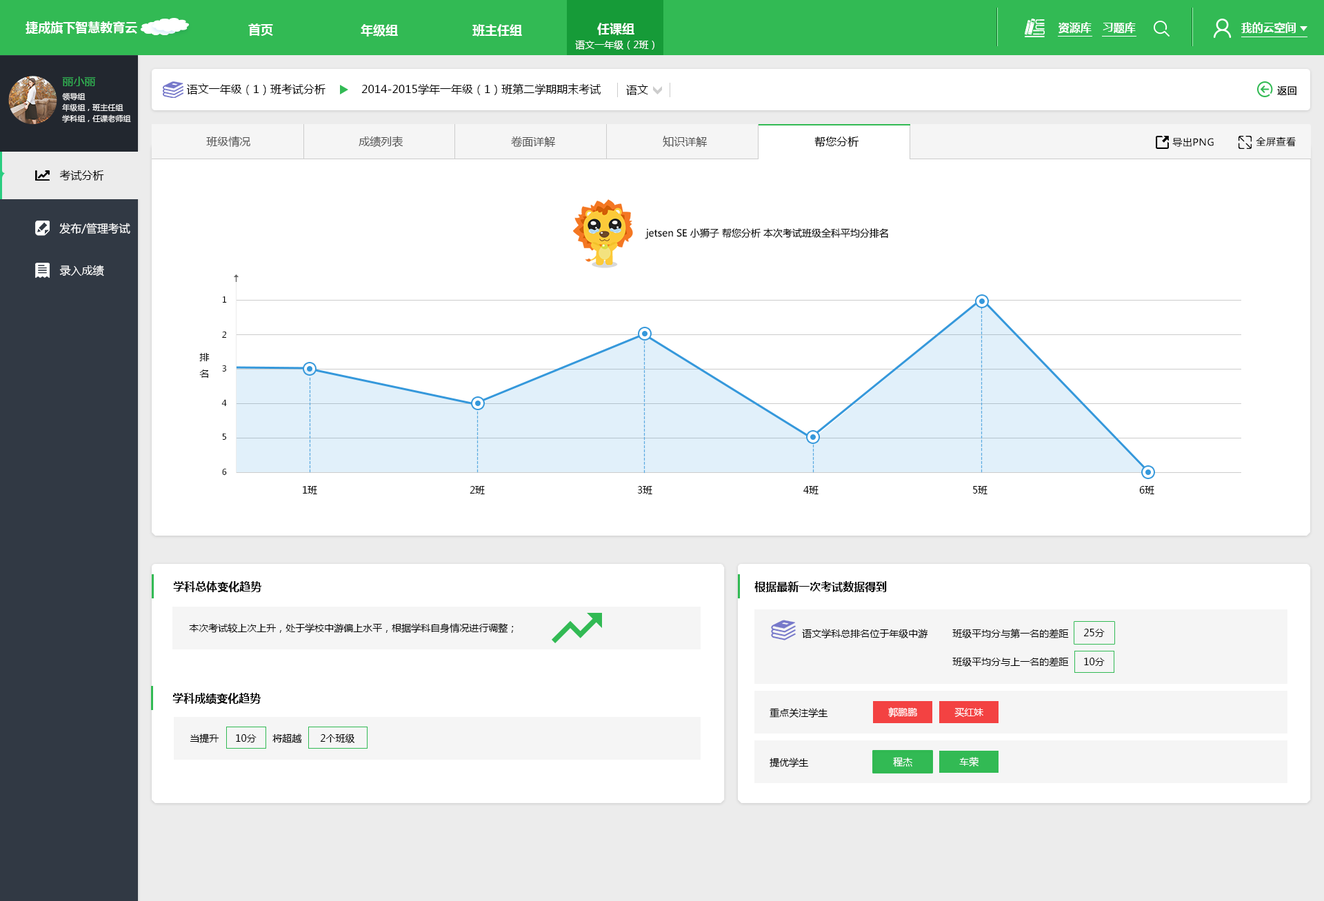
<style>
.page{position:relative;width:1324px;height:901px;background:#ffffff}
.page>*{position:absolute;margin:0}
.t1{font:12.4px "MicrosoftYaHei-Bold";color:#ffffff}
.t2{font:11px "MicrosoftYaHei-Bold";color:#ffffff}
.t3{font:9.7px "MicrosoftYaHei";color:#ffffff}
.t4{font:11px "MicrosoftYaHei";color:#32ba54}
.t5{font:11px "MicrosoftYaHei";color:#000000}
.t6{font:9.7px "MicrosoftYaHei";letter-spacing:0.04em;color:#000000}
.t7{font:7.6px/11px "MicrosoftYaHei";color:#ffffff}
.t8{font:11px "MicrosoftYaHei";color:#545454}
.t9{font:11px "MicrosoftYaHei";color:#ffffff}
.t10{font:9.7px "MicrosoftYaHei";color:#000000}
.t11{font:8.3px "MicrosoftYaHei";letter-spacing:0.04em;color:#000000}
.t12{font:9.7px/16.5px "MicrosoftYaHei";color:#62afe3}
.t13{font:9.7px/16.5px "MicrosoftYaHei";color:#000000}
.t14{font:11px "MicrosoftYaHei-Bold";color:#000000}
</style>
<div class="page">
<p class="t1" style="left:26px;top:21px;width:111px;height:13px">捷成旗下智慧教育云</p>
<p class="t1" style="left:248px;top:23px;width:25px;height:13px">首页</p>
<p class="t1" style="left:361px;top:24px;width:37px;height:13px">年级组</p>
<p class="t1" style="left:472px;top:24px;width:50px;height:13px">班主任组</p>
<p class="t1" style="left:597px;top:23px;width:37px;height:12px">任课组</p>
<p class="t2" style="left:1058px;top:22px;width:33px;height:12px">资源库</p>
<p class="t2" style="left:1102px;top:22px;width:33px;height:12px">习题库</p>
<p class="t2" style="left:1241px;top:22px;width:54px;height:11px">我的云空间</p>
<p class="t3" style="left:575px;top:40px;width:79px;height:10px">语文一年级（2班）</p>
<p class="t4" style="left:62px;top:77px;width:34px;height:9px">丽小丽</p>
<p class="t5" style="left:187px;top:83px;width:138px;height:12px">语文一年级（1）班考试分析</p>
<p class="t5" style="left:361px;top:83px;width:239px;height:12px">2014-2015学年一年级（1）班第二学期期末考试</p>
<p class="t5" style="left:626px;top:84px;width:22px;height:11px">语文</p>
<p class="t6" style="left:1277px;top:85px;width:19px;height:10px">返回</p>
<p class="t6" style="left:1277px;top:85px;width:19px;height:10px">返回</p>
<p class="t7" style="left:62px;top:93px;width:69px;height:30px">领导组<br>年级组，班主任组<br>学科组，任课老师组</p>
<p class="t8" style="left:206px;top:136px;width:44px;height:11px">班级情况</p>
<p class="t8" style="left:358px;top:136px;width:45px;height:12px">成绩列表</p>
<p class="t8" style="left:511px;top:136px;width:45px;height:11px">卷面详解</p>
<p class="t8" style="left:662px;top:136px;width:45px;height:11px">知识详解</p>
<p class="t5" style="left:814px;top:136px;width:45px;height:11px">帮您分析</p>
<p class="t6" style="left:1172px;top:137px;width:41px;height:10px">导出PNG</p>
<p class="t6" style="left:1255px;top:136px;width:40px;height:11px">全屏查看</p>
<p class="t5" style="left:59px;top:170px;width:45px;height:11px">考试分析</p>
<p class="t9" style="left:59px;top:223px;width:71px;height:11px">发布/管理考试</p>
<p class="t10" style="left:645px;top:228px;width:243px;height:11px">jetsen SE 小狮子 帮您分析 本次考试班级全科平均分排名</p>
<p class="t9" style="left:59px;top:265px;width:45px;height:11px">录入成绩</p>
<p class="t11" style="left:223px;top:296px;width:4px;height:7px">1</p>
<p class="t12" style="left:980px;top:301px;width:2px;height:172px">-----------------------------------------</p>
<p class="t11" style="left:222px;top:331px;width:4px;height:7px">2</p>
<p class="t12" style="left:643px;top:332px;width:2px;height:142px">----------------------------------</p>
<p class="t13" style="left:199px;top:353px;width:11px;height:25px">排<br>名</p>
<p class="t11" style="left:222px;top:365px;width:4px;height:7px">3</p>
<p class="t12" style="left:309px;top:372px;width:2px;height:101px">------------------------</p>
<p class="t11" style="left:221px;top:399px;width:6px;height:7px">4</p>
<p class="t12" style="left:476px;top:406px;width:2px;height:67px">----------------</p>
<p class="t11" style="left:222px;top:433px;width:4px;height:7px">5</p>
<p class="t12" style="left:812px;top:439px;width:2px;height:34px">--------</p>
<p class="t11" style="left:222px;top:468px;width:5px;height:7px">6</p>
<p class="t10" style="left:303px;top:486px;width:14px;height:8px">1班</p>
<p class="t10" style="left:469px;top:486px;width:16px;height:8px">2班</p>
<p class="t10" style="left:637px;top:486px;width:15px;height:8px">3班</p>
<p class="t10" style="left:803px;top:486px;width:15px;height:8px">4班</p>
<p class="t10" style="left:973px;top:486px;width:14px;height:8px">5班</p>
<p class="t10" style="left:1139px;top:486px;width:15px;height:8px">6班</p>
<p class="t14" style="left:173px;top:581px;width:89px;height:12px">学科总体变化趋势</p>
<p class="t14" style="left:754px;top:581px;width:132px;height:12px">根据最新一次考试数据得到</p>
<p class="t10" style="left:189px;top:623px;width:325px;height:10px">本次考试较上次上升，处于学校中游偏上水平，根据学科自身情况进行调整；</p>
<p class="t10" style="left:802px;top:629px;width:126px;height:9px">语文学科总排名位于年级中游</p>
<p class="t10" style="left:952px;top:629px;width:116px;height:9px">班级平均分与第一名的差距</p>
<p class="t10" style="left:1083px;top:629px;width:21px;height:8px">25分</p>
<p class="t10" style="left:952px;top:657px;width:116px;height:10px">班级平均分与上一名的差距</p>
<p class="t10" style="left:1084px;top:658px;width:20px;height:8px">10分</p>
<p class="t14" style="left:172px;top:693px;width:89px;height:11px">学科成绩变化趋势</p>
<p class="t10" style="left:769px;top:708px;width:59px;height:10px">重点关注学生</p>
<p class="t3" style="left:888px;top:707px;width:29px;height:11px">郭鹏鹏</p>
<p class="t3" style="left:954px;top:708px;width:29px;height:9px">买红妹</p>
<p class="t10" style="left:190px;top:733px;width:29px;height:10px">当提升</p>
<p class="t10" style="left:236px;top:734px;width:20px;height:8px">10分</p>
<p class="t10" style="left:272px;top:733px;width:30px;height:10px">将超越</p>
<p class="t10" style="left:320px;top:733px;width:35px;height:10px">2个班级</p>
<p class="t10" style="left:769px;top:758px;width:40px;height:9px">提优学生</p>
<p class="t3" style="left:893px;top:757px;width:19px;height:10px">程杰</p>
<p class="t3" style="left:959px;top:757px;width:19px;height:10px">车荣</p>
</div>
